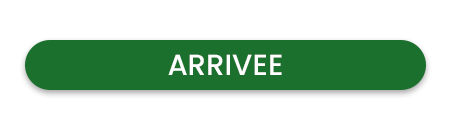
<style>
.page{position:relative;width:450px;height:130px;background:#ffffff}
.page>*{position:absolute;margin:0}
.t1{font:29.2px "Poppins-Medium";color:#ffffff}
</style>
<div class="page">
<p class="t1" style="left:168px;top:54px;width:114px;height:21px">ARRIVEE</p>
</div>
